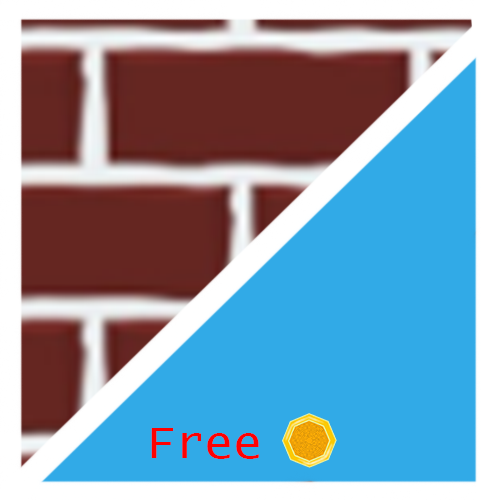
<style>
.page{position:relative;width:500px;height:500px;background:#31aae7}
.page>*{position:absolute;margin:0}
.t1{font:48px "LucidaConsole";color:#ff0101}
</style>
<div class="page">
<p class="t1" style="left:151px;top:428px;width:108px;height:31px">Free</p>
</div>
